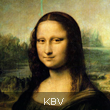
<style>
.page{position:relative;width:110px;height:110px}
.page>*{position:absolute;margin:0}
.t1{font:10px "ArialMT";color:#e3dfd1}
</style>
<div class="page">
<p class="t1" style="left:44px;top:98px;width:20px;height:7px">KBV</p>
</div>
